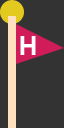
<style>
.page{position:relative;width:64px;height:128px;background:#333333}
.page>*{position:absolute;margin:0}
.t1{font:30px "04b03";color:#ffffff}
</style>
<div class="page">
<p class="t1" style="left:20px;top:36px;width:16px;height:19px">H</p>
</div>
